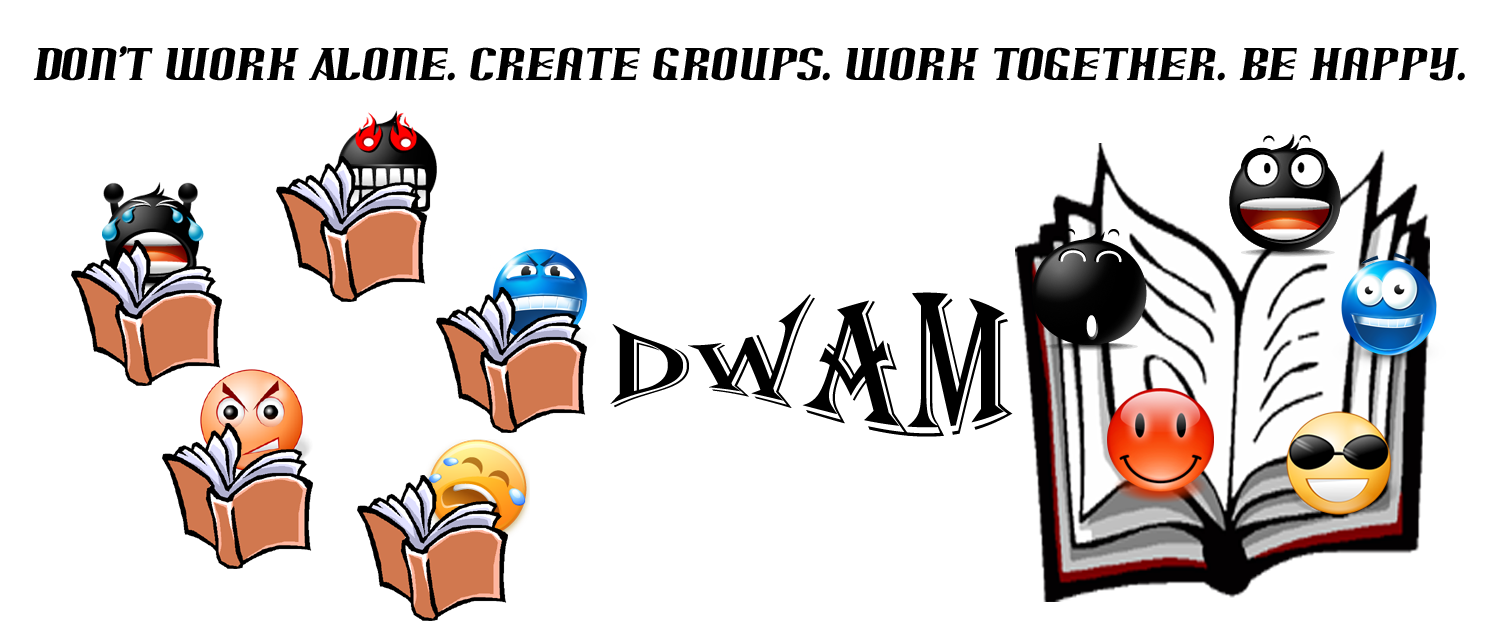
<style>
.page{position:relative;width:1500px;height:634px;background:#ffffff}
.page>*{position:absolute;margin:0}
.t1{font:40px "Arnprior";color:#000000}
</style>
<div class="page">
<p class="t1" style="left:33px;top:46px;width:1432px;height:35px">Don’t work Alone. Create groups. work together. be happy.</p>
</div>
